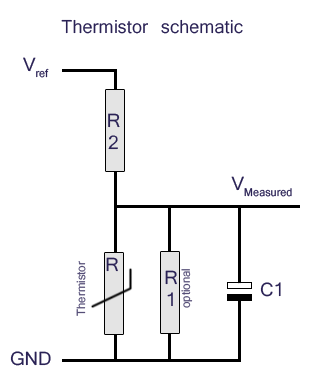
<style>
.page{position:relative;width:314px;height:379px;background:#ffffff}
.page>*{position:absolute;margin:0}
.t1{font:30px "Kartika";color:#2a2255}
.t2{font:18px "Kartika";color:#2a2255}
.t3{font:11px "Kartika";color:#554e77}
</style>
<div class="page">
<p class="t1" style="left:61px;top:19px;width:182px;height:15px">Thermistor schematic</p>
<p class="t2" style="left:23px;top:57px;width:26px;height:21px">Vref</p>
<p class="t2" style="left:108px;top:113px;width:12px;height:37px;text-align:center">R<br>2</p>
<p class="t2" style="left:231px;top:176px;width:61px;height:21px">VMeasured</p>
<p class="t2" style="left:106px;top:257px;width:12px;height:15px">R</p>
<p class="t3" style="left:76px;top:261px;width:10px;height:55px;rotate:-90deg">Thermistor</p>
<p class="t2" style="left:165px;top:270px;width:12px;height:36px;text-align:center">R<br>1</p>
<p class="t3" style="left:181px;top:269px;width:12px;height:39px;rotate:-90deg">optional</p>
<p class="t2" style="left:260px;top:282px;width:21px;height:15px">C1</p>
<p class="t2" style="left:10px;top:351px;width:41px;height:15px">GND</p>
</div>
